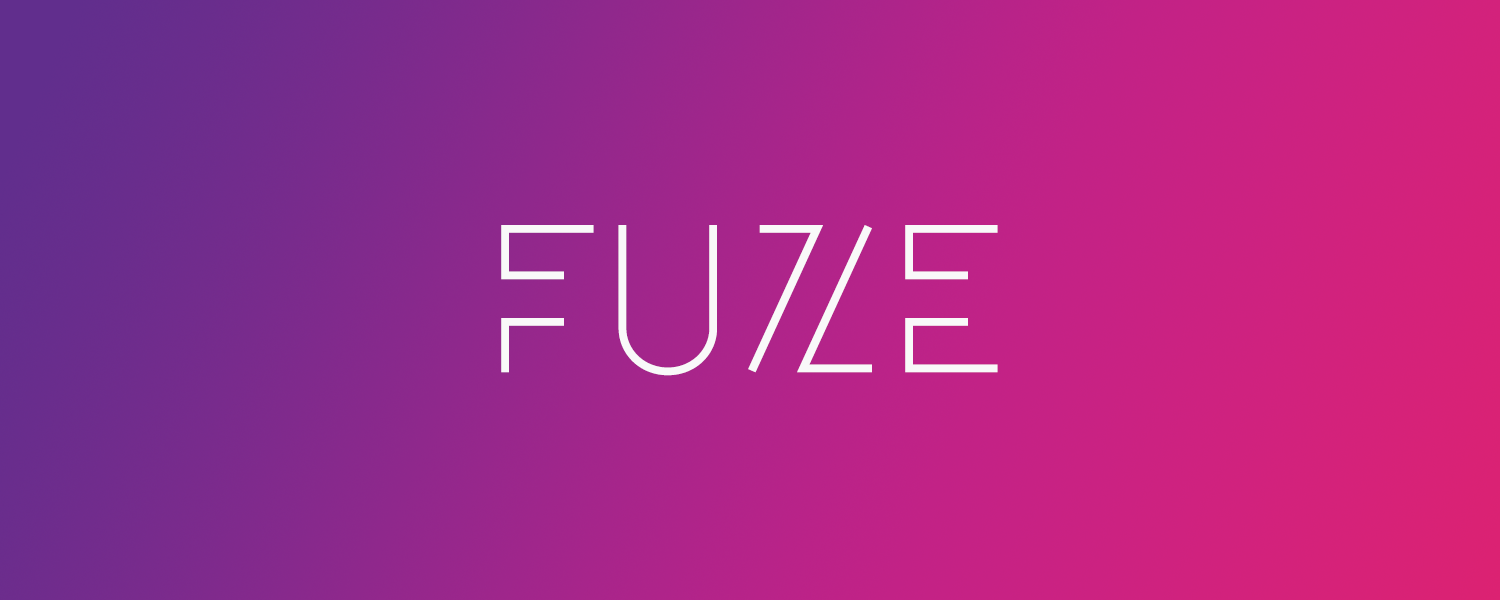
<style>
.page{position:relative;width:1500px;height:600px}
.page>*{position:absolute;margin:0}
.t1{font:210px "Lombok";color:#f9f9f9}
</style>
<div class="page">
<p class="t1" style="left:501px;top:225px;width:497px;height:151px">FUZE</p>
</div>
